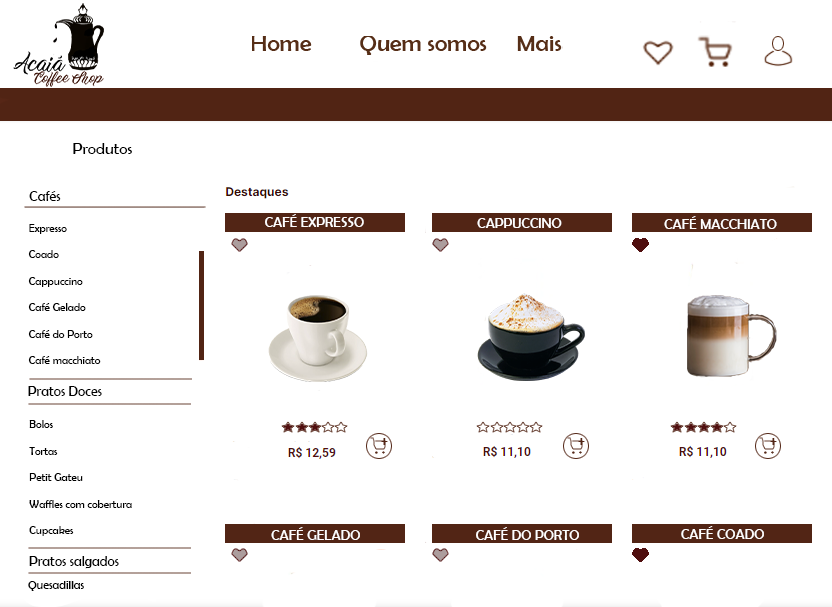
<style>
.page{position:relative;width:832px;height:607px;background:#ffffff}
.page>*{position:absolute;margin:0}
.t1{font:16px "BerlinSansFB-Reg";color:#000000}
.t2{font:14px "BerlinSansFB-Reg";color:#000000}
.t3{font:14px "BerlinSansFB-Reg";color:#fffefe}
.t4{font:11px "BerlinSansFB-Reg";color:#000000}
</style>
<div class="page">
<p class="t1" style="left:73px;top:143px;width:59px;height:11px">Produtos</p>
<p class="t2" style="left:29px;top:191px;width:32px;height:10px">Cafés</p>
<p class="t3" style="left:265px;top:214px;width:99px;height:13px">CAFÉ EXPRESSO</p>
<p class="t3" style="left:477px;top:218px;width:85px;height:10px">CAPPUCCINO</p>
<p class="t3" style="left:664px;top:216px;width:113px;height:13px">CAFÉ MACCHIATO</p>
<p class="t4" style="left:28px;top:224px;width:73px;height:140px">Expresso<br><br>Coado<br><br>Cappuccino <br><br>Café Gelado<br><br>Café do Porto<br><br>Café macchiato</p>
<p class="t2" style="left:28px;top:386px;width:74px;height:10px">Pratos Doces</p>
<p class="t4" style="left:29px;top:420px;width:103px;height:116px">Bolos<br><br>Tortas<br><br>Petit Gateu<br><br>Waffles com cobertura<br><br>Cupcakes</p>
<p class="t3" style="left:271px;top:527px;width:89px;height:13px">CAFÉ GELADO</p>
<p class="t3" style="left:476px;top:527px;width:103px;height:13px">CAFÉ DO PORTO</p>
<p class="t3" style="left:681px;top:526px;width:83px;height:13px">CAFÉ COADO</p>
<p class="t2" style="left:29px;top:556px;width:90px;height:13px">Pratos salgados</p>
</div>
